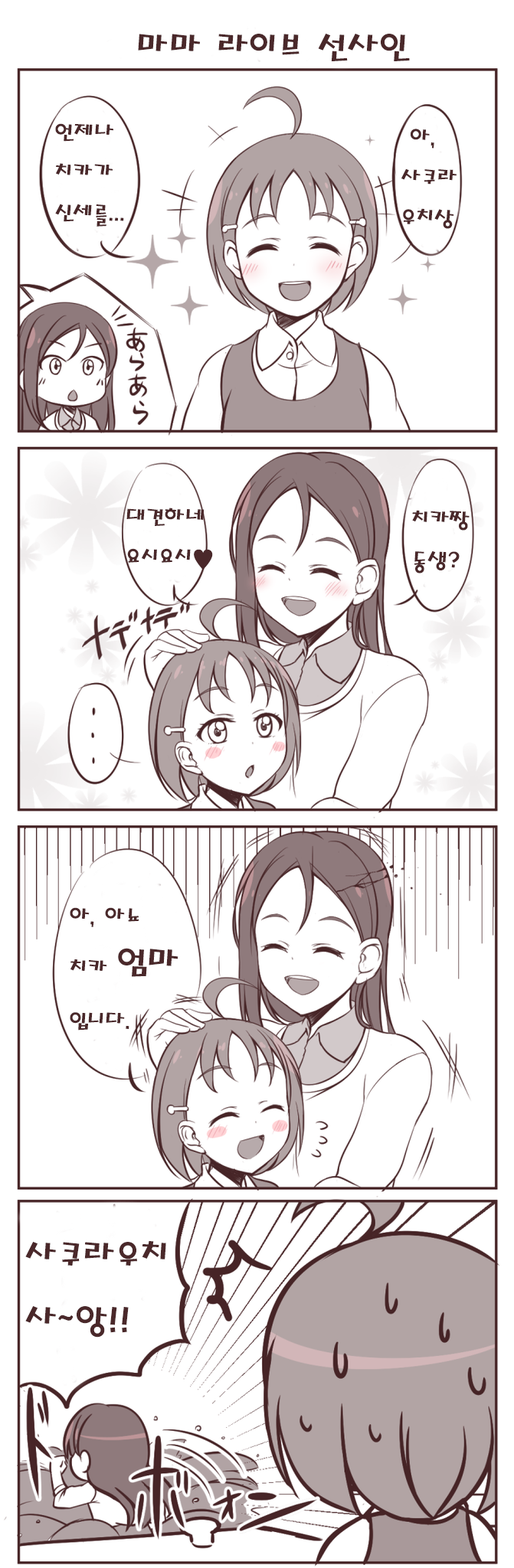
<style>
.page{position:relative;width:514px;height:1568px;background:#ffffff}
.page>*{position:absolute;margin:0}
.t1{font:36.8px "MagicR-HM";color:#4a282a}
.t2{font:23px "MagicR-HM";color:#4a282a}
</style>
<div class="page">
<p class="t1" style="left:138px;top:34px;width:272px;height:27px">마마 라이브 선사인</p>
<p class="t2" style="left:55px;top:123px;width:69px;height:104px">언제나<br>치카가<br>신세를...</p>
<p class="t2" style="left:401px;top:129px;width:55px;height:100px">아,<br>사쿠라<br>우치상</p>
<p class="t2" style="left:126px;top:508px;width:87px;height:62px">대견하네<br>요시요시♥</p>
<p class="t2" style="left:412px;top:510px;width:57px;height:63px">치카짱<br>동생?</p>
<p class="t2" style="left:70px;top:907px;width:108px;height:124px">아, 아뇨<br>치카 <span class="t1">엄마<br></span>입니다.</p>
<p class="t1" style="left:25px;top:1241px;width:141px;height:97px">사쿠라우치<br>사~앙!!</p>
</div>
